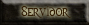
<style>
.page{position:relative;width:89px;height:25px}
.page>*{position:absolute;margin:0}
.t1{font:13px "Morpheus";color:#331e03}
</style>
<div class="page">
<p class="t1" style="left:21px;top:6px;width:51px;height:12px">Servidor</p>
</div>
